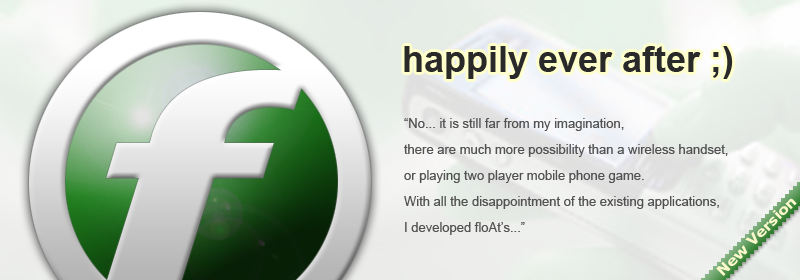
<style>
.page{position:relative;width:800px;height:280px}
.page>*{position:absolute;margin:0}
.t1{font:36px "Arial-BoldMT";color:#292929}
.t2{font:13px/26px "ArialMT";color:#525252}
</style>
<div class="page">
<p class="t1" style="left:404px;top:46px;width:329px;height:33px">happily ever after ;)</p>
<p class="t2" style="left:404px;top:118px;width:324px;height:117px">“No... it is still far from my imagination,<br>there are much more possibility than a wireless handset,<br>or playing two player mobile phone game.<br>With all the disappointment of the existing applications,<br>I developed floAt’s...”</p>
</div>
